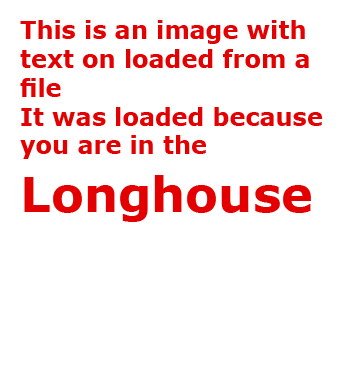
<style>
.page{position:relative;width:356px;height:371px;background:#ffffff}
.page>*{position:absolute;margin:0}
.t1{font:24px "Verdana-Bold";color:#e30000}
.t2{font:48px "Verdana-Bold";color:#e30000}
</style>
<div class="page">
<p class="t1" style="left:20px;top:20px;width:302px;height:202px">This is an image with text on loaded from a file<br>It was loaded because you are in the <br><span class="t2">Longhouse</span></p>
</div>
